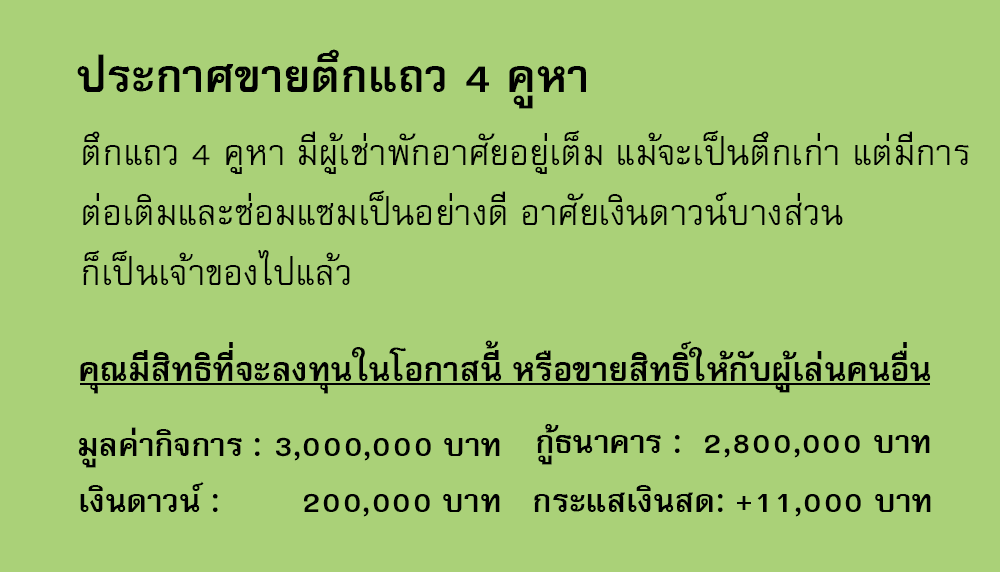
<style>
.page{position:relative;width:1000px;height:572px;background:#aad178}
.page>*{position:absolute;margin:0}
.t1{font:64px "FreesiaUPCBold";color:#000000}
.t2{font:50px/60px "FreesiaUPC";color:#000000}
.t3{font:47px "FreesiaUPCBold";color:#000000}
.t4{font:45px "FreesiaUPCBold";color:#000000}
</style>
<div class="page">
<p class="t1" style="left:77px;top:49px;width:509px;height:60px">ประกาศขายตึกแถว 4 คูหา</p>
<p class="t2" style="left:83px;top:130px;width:886px;height:155px">ตึกแถว 4 คูหา มีผู้เช่าพักอาศัยอยู่เต็ม แม้จะเป็นตึกเก่า แต่มีการ<br>ต่อเติมและซ่อมแซมเป็นอย่างดี อาศัยเงินดาวน์บางส่วน<br>ก็เป็นเจ้าของไปแล้ว</p>
<p class="t3" style="left:80px;top:340px;width:851px;height:54px">คุณมีสิทธิที่จะลงทุนในโอกาสนี้ หรือขายสิทธิ์ให้กับผู้เล่นคนอื่น</p>
<p class="t4" style="left:537px;top:424px;width:393px;height:41px">กู้ธนาคาร :  2,800,000 บาท</p>
<p class="t4" style="left:78px;top:427px;width:422px;height:41px">มูลค่ากิจการ : 3,000,000 บาท</p>
<p class="t4" style="left:80px;top:481px;width:420px;height:36px">เงินดาวน์ :        200,000 บาท</p>
<p class="t4" style="left:534px;top:485px;width:397px;height:32px">กระแสเงินสด: +11,000 บาท</p>
</div>
